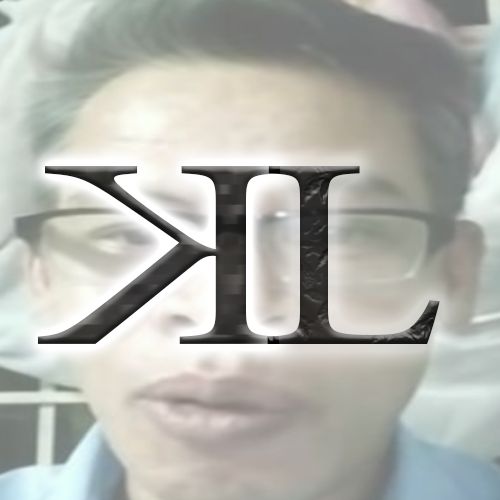
<style>
.page{position:relative;width:500px;height:500px}
.page>*{position:absolute;margin:0}
.t1{font:334.8px "AdobeThai-Regular";scale:1.41 1}
.t2{font:334.8px "AdobeThai-Regular";color:#2d2c2b;scale:1.29 1}
</style>
<div class="page">
<p class="t1" style="left:37px;top:166px;width:243px;height:178px;rotate:180deg">K</p>
<p class="t2" style="left:267px;top:166px;width:173px;height:178px">L</p>
</div>
